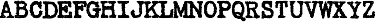
<style>
.page{position:relative;width:375px;height:22px;background:#ffffff}
.page>*{position:absolute;margin:0}
.t1{font:24px "GabrieleBlackRibbonFG";color:#000000}
</style>
<div class="page">
<p class="t1" style="left:0px;top:0px;width:375px;height:22px">ABCDEFGHIJKLMNOPQRSTUVWXYZ</p>
</div>
